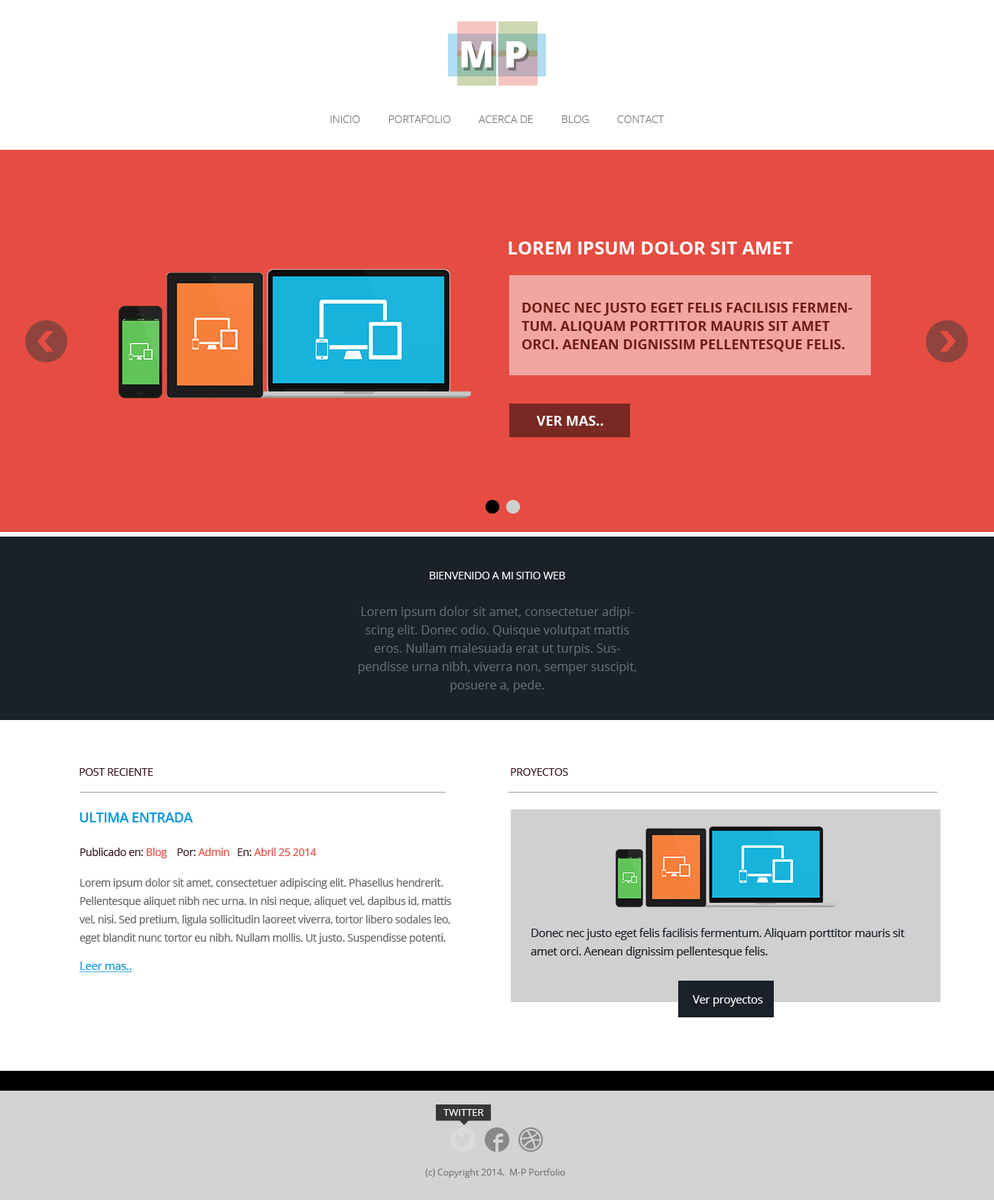
<style>
.page{position:relative;width:994px;height:1200px;background:#ffffff}
.page>*{position:absolute;margin:0}
.t1{font:36.7px "OpenSans-Extrabold";letter-spacing:0.25em;color:#ffffff}
.t2{font:36.7px "OpenSans-Extrabold";letter-spacing:0.25em;color:#ffffff;scale:1.06 1}
.t3{font:10.7px "OpenSans-Light";color:#7a7a7a;text-transform:uppercase}
.t4{font:18.3px "OpenSans-Bold";color:#ffffff;text-transform:uppercase}
.t5{font:13.8px/18.3px "OpenSans-Bold";color:#701c16;text-transform:uppercase}
.t6{font:13.8px "OpenSans-Bold";color:#ffffff;text-transform:uppercase}
.t7{font:12.2px/18.3px "OpenSans";color:#687078}
.t8{font:10.7px/18.3px "OpenSans";letter-spacing:-0.025em;color:#ffffff;text-transform:uppercase}
.t9{font:10.7px "OpenSans";letter-spacing:-0.025em;color:#3c1c22;text-transform:uppercase}
.t10{font:13.8px "OpenSans-Semibold";letter-spacing:-0.025em;color:#0e96dd;text-transform:uppercase}
.t11{font:10.7px "OpenSans";letter-spacing:-0.025em;color:#3c1c22}
.t12{font:10.7px "OpenSans";letter-spacing:-0.025em;color:#e54d42}
.t13{font:10.7px/18.3px "OpenSans";letter-spacing:-0.025em;color:#646464}
.t14{font:11.5px/18.3px "OpenSans";letter-spacing:-0.025em;color:#1a2128}
.t15{font:11.5px "OpenSans";letter-spacing:-0.025em;color:#0e96dd;text-decoration:underline}
.t16{font:11.5px "OpenSans";letter-spacing:-0.025em;color:#ffffff}
.t17{font:9.9px "OpenSans";color:#ffffff;text-transform:uppercase}
.t18{font:9.2px "OpenSans";color:#7a7a7a}
</style>
<div class="page">
<p class="t1" style="left:461px;top:41px;width:66px;height:27px">M<span class="t2">P</span></p>
<p class="t3" style="left:330px;top:115px;width:334px;height:8px">INICIO          PortAfolio          ACERCA DE          BLOG          Contact</p>
<p class="t4" style="left:508px;top:242px;width:285px;height:13px">Lorem ipsum dolor sit amet</p>
<p class="t4" style="left:508px;top:242px;width:285px;height:13px">Lorem ipsum dolor sit amet</p>
<p class="t5" style="left:521px;top:303px;width:331px;height:49px">Donec nec justo eget felis facilisis fermentum. Aliquam porttitor mauris sit amet orci. Aenean dignissim pellentesque felis.</p>
<p class="t5" style="left:521px;top:303px;width:331px;height:49px">Donec nec justo eget felis facilisis fermentum. Aliquam porttitor mauris sit amet orci. Aenean dignissim pellentesque felis.</p>
<p class="t6" style="left:536px;top:416px;width:67px;height:10px">Ver mas..</p>
<p class="t6" style="left:536px;top:416px;width:67px;height:10px">Ver mas..</p>
<p class="t7" style="left:358px;top:572px;width:278px;height:121px;text-align:center"><span class="t8">BIENVENIDO A MI SITIO WEB<br><br></span>Lorem ipsum dolor sit amet, consectetuer adipiscing elit. Donec odio. Quisque volutpat mattis eros. Nullam malesuada erat ut turpis. Suspendisse urna nibh, viverra non, semper suscipit, posuere a, pede.</p>
<p class="t9" style="left:79px;top:768px;width:74px;height:8px">Post Reciente</p>
<p class="t9" style="left:511px;top:768px;width:57px;height:8px">Proyectos</p>
<p class="t10" style="left:79px;top:813px;width:114px;height:9px">Ultima entrada</p>
<p class="t11" style="left:80px;top:848px;width:236px;height:10px">Publicado en:<span class="t12"> Blog</span>    Por: <span class="t12">Admin</span>   En: <span class="t12">Abril 25 2014</span></p>
<p class="t13" style="left:79px;top:878px;width:372px;height:66px">Lorem ipsum dolor sit amet, consectetuer adipiscing elit. Phasellus hendrerit. Pellentesque aliquet nibh nec urna. In nisi neque, aliquet vel, dapibus id, mattis vel, nisi. Sed pretium, ligula sollicitudin laoreet viverra, tortor libero sodales leo, eget blandit nunc tortor eu nibh. Nullam mollis. Ut justo. Suspendisse potenti.</p>
<p class="t14" style="left:530px;top:928px;width:374px;height:31px">Donec nec justo eget felis facilisis fermentum. Aliquam porttitor mauris sit amet orci. Aenean dignissim pellentesque felis.</p>
<p class="t15" style="left:79px;top:962px;width:53px;height:10px">Leer mas..</p>
<p class="t16" style="left:693px;top:995px;width:70px;height:12px">Ver proyectos</p>
<p class="t17" style="left:443px;top:1109px;width:41px;height:7px">twitter</p>
<p class="t18" style="left:425px;top:1169px;width:140px;height:9px">(c) Copyright 2014.  M-P Portfolio</p>
</div>
